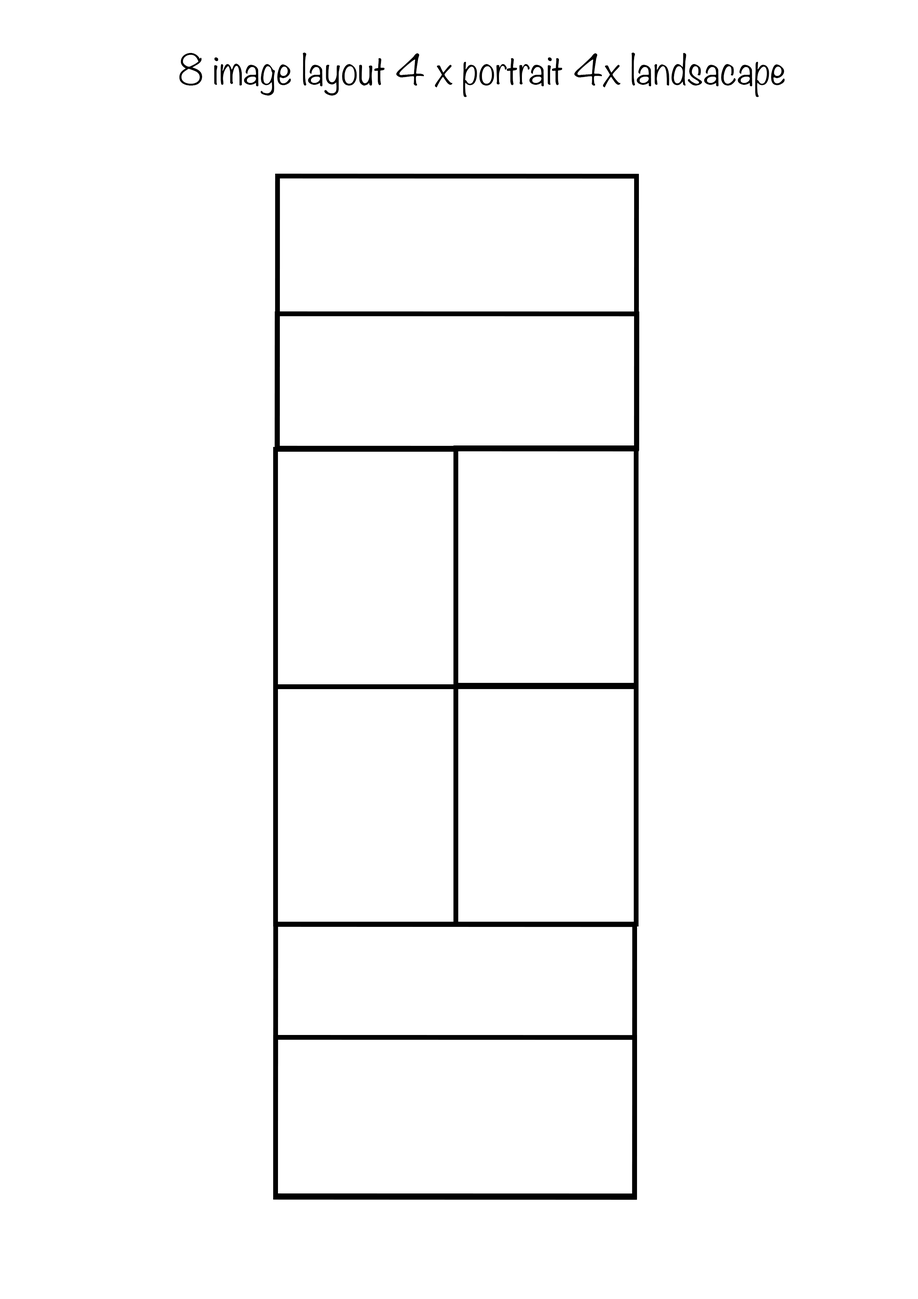
<style>
.page{position:relative;width:918px;height:1299px;background:#ffffff}
.page>*{position:absolute;margin:0}
.t1{font:37px "Noteworthy-Light";color:#000000}
</style>
<div class="page">
<p class="t1" style="left:179px;top:53px;width:606px;height:44px">8 image layout 4 x portrait 4x landsacape</p>
</div>
